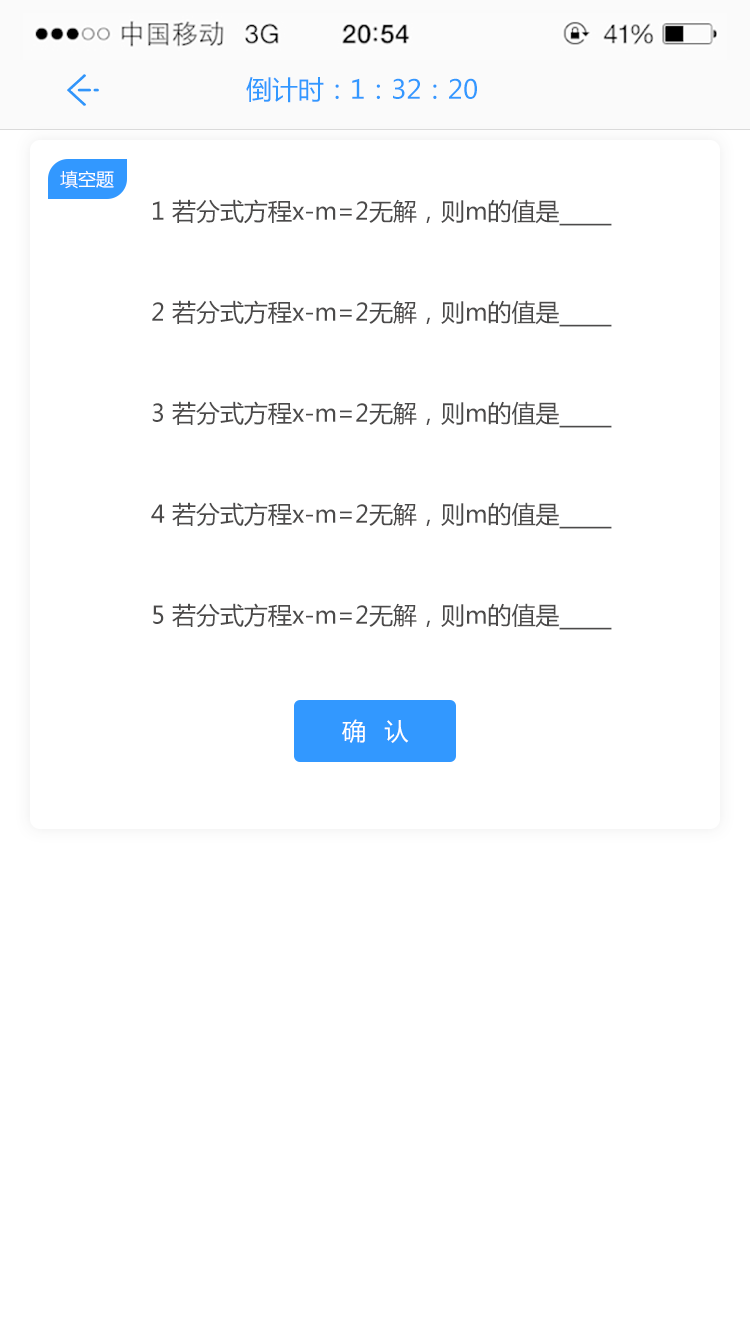
<style>
.page{position:relative;width:750px;height:1334px;background:#ffffff}
.page>*{position:absolute;margin:0}
.t1{font:26px "MicrosoftYaHei";color:#3298ff}
.t2{font:18px "MicrosoftYaHei";color:#ffffff}
.t3{font:24px "MicrosoftYaHei";color:#4b4a4a}
.t4{font:24px "MicrosoftYaHei";letter-spacing:0.24em;color:#ffffff}
</style>
<div class="page">
<p class="t1" style="left:246px;top:77px;width:231px;height:26px">倒计时：1：32：20</p>
<p class="t2" style="left:60px;top:170px;width:54px;height:19px">填空题</p>
<p class="t3" style="left:153px;top:199px;width:459px;height:27px">1 若分式方程x-m=2无解，则m的值是——</p>
<p class="t3" style="left:152px;top:300px;width:460px;height:27px">2 若分式方程x-m=2无解，则m的值是——</p>
<p class="t3" style="left:152px;top:401px;width:460px;height:27px">3 若分式方程x-m=2无解，则m的值是——</p>
<p class="t3" style="left:151px;top:502px;width:461px;height:27px">4 若分式方程x-m=2无解，则m的值是——</p>
<p class="t3" style="left:153px;top:603px;width:459px;height:27px">5 若分式方程x-m=2无解，则m的值是——</p>
<p class="t4" style="left:342px;top:719px;width:67px;height:24px">确 认</p>
</div>
